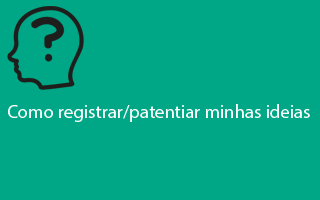
<style>
.page{position:relative;width:320px;height:200px;background:#00a786}
.page>*{position:absolute;margin:0}
.t1{font:18.7px "MyriadPro-Regular";color:#fdfdfd}
</style>
<div class="page">
<p class="t1" style="left:8px;top:104px;width:302px;height:18px">Como registrar/patentiar minhas ideias</p>
</div>
